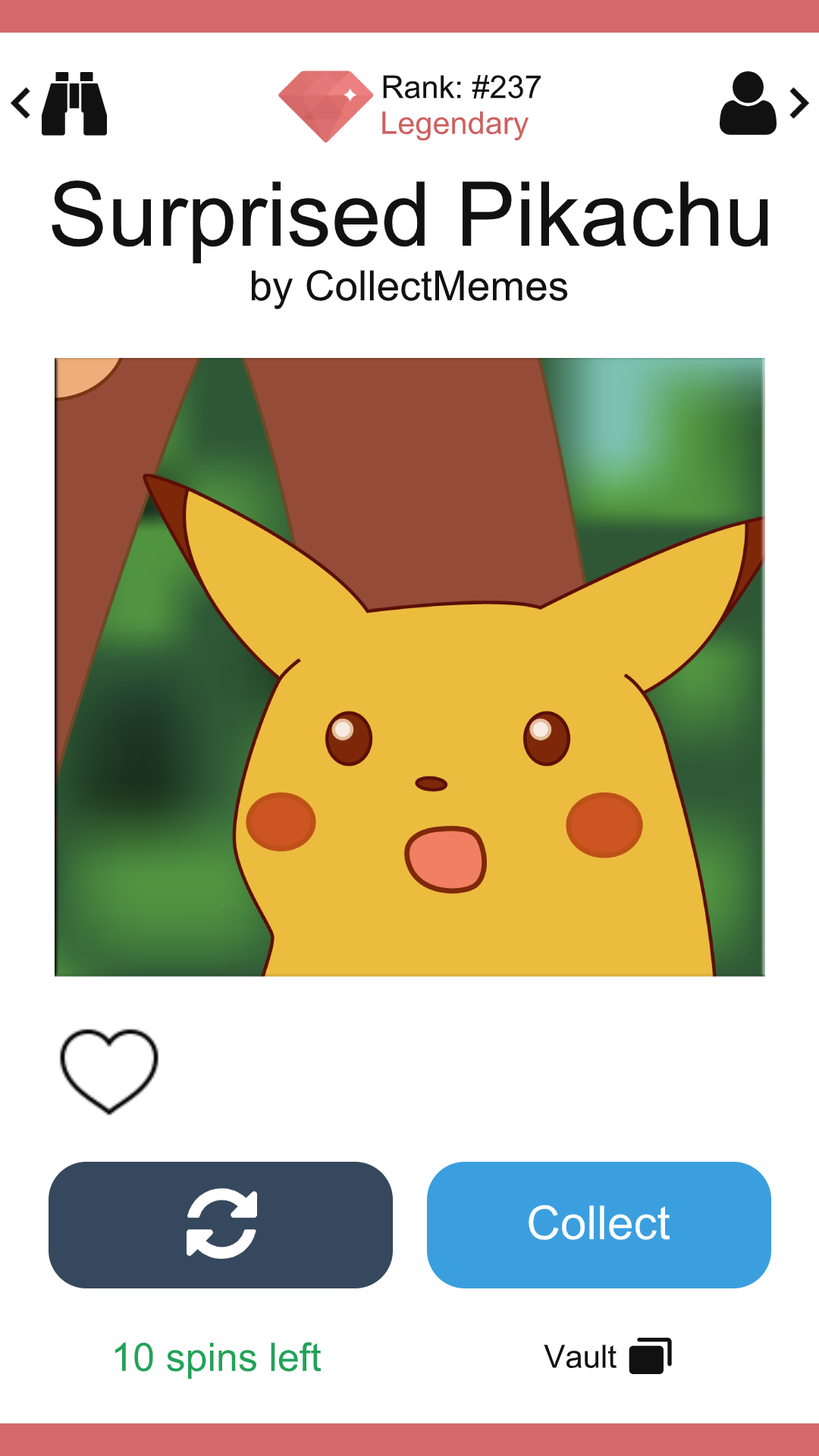
<style>
.page{position:relative;width:819px;height:1456px;background:#ffffff}
.page>*{position:absolute;margin:0}
.t1{font:31.5px "ArialMT";color:#111111}
.t2{font:31.5px "ArialMT";color:#ce6060}
.t3{font:89.5px "ArialMT";color:#111111}
.t4{font:41.7px "ArialMT";color:#111111}
.t5{font:47px "ArialMT";color:#ffffff}
.t6{font:39.4px "ArialMT";color:#22a258}
.t7{font:31.8px "ArialMT";color:#111111}
</style>
<div class="page">
<p class="t1" style="left:383px;top:75px;width:158px;height:24px">Rank: #237</p>
<p class="t2" style="left:382px;top:111px;width:147px;height:30px">Legendary</p>
<p class="t3" style="left:52px;top:180px;width:716px;height:84px">Surprised Pikachu</p>
<p class="t4" style="left:252px;top:270px;width:316px;height:39px">by CollectMemes</p>
<p class="t5" style="left:529px;top:1205px;width:141px;height:35px">Collect</p>
<p class="t6" style="left:115px;top:1342px;width:207px;height:37px">10 spins left</p>
<p class="t7" style="left:544px;top:1345px;width:73px;height:24px">Vault</p>
</div>
